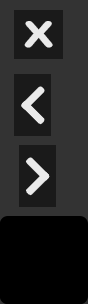
<style>
.page{position:relative;width:88px;height:304px;background:#333333}
.page>*{position:absolute;margin:0}
.t1{font:49px "ArialRoundedMTBold";color:#eaeaea;scale:1.21 1}
</style>
<div class="page">
<p class="t1" style="left:24px;top:21px;width:29px;height:27px">x</p>
</div>
